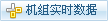
<style>
.page{position:relative;width:108px;height:21px}
.page>*{position:absolute;margin:0}
.t1{font:12px "SimSun";color:#265d87}
</style>
<div class="page">
<p class="t1" style="left:26px;top:4px;width:71px;height:11px">机组实时数据</p>
</div>
